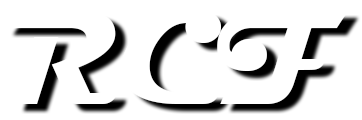
<style>
.page{position:relative;width:362px;height:120px;background:#ffffff}
.page>*{position:absolute;margin:0}
.t1{font:135px "Magneto-Bold";color:#ffffff}
</style>
<div class="page">
<p class="t1" style="left:3px;top:11px;width:345px;height:93px">RCF</p>
</div>
